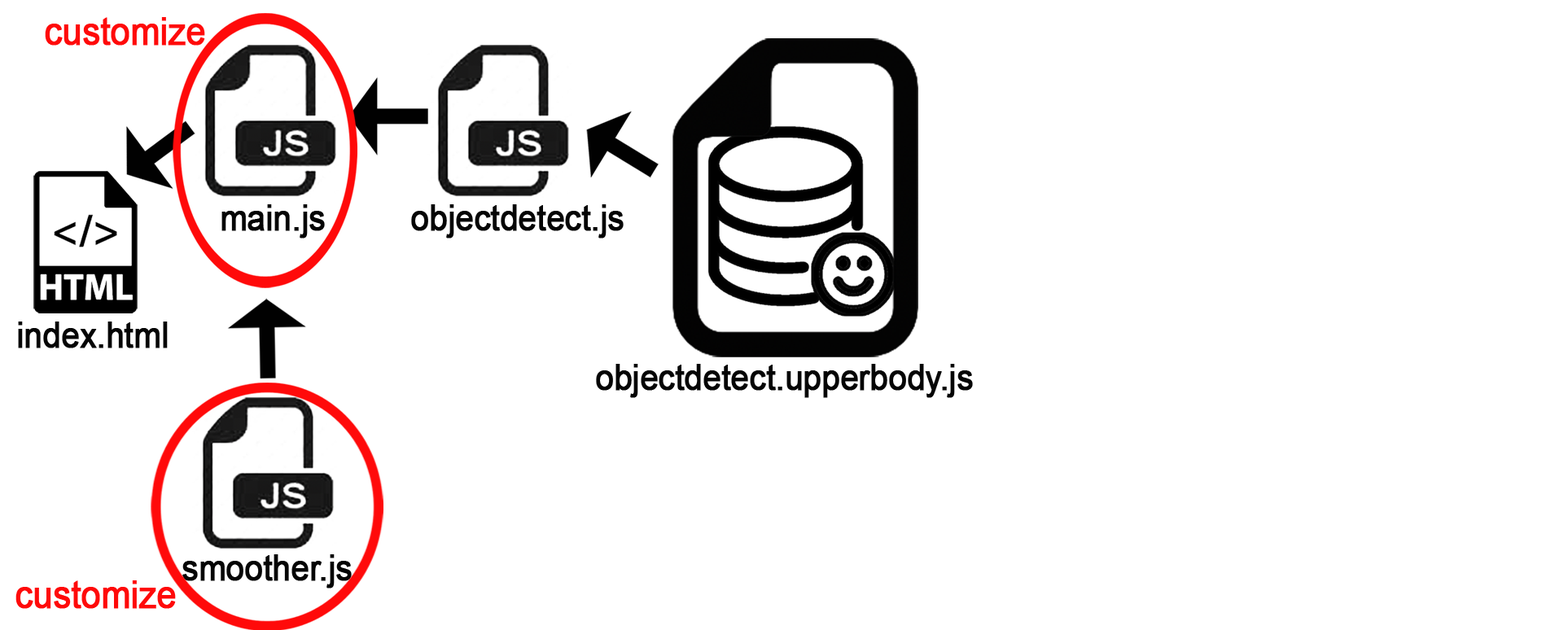
<style>
.page{position:relative;width:1568px;height:630px;background:#ffffff}
.page>*{position:absolute;margin:0}
.t1{font:38.2px "ArialMT";letter-spacing:-0.017em;color:#ff0a0a;font-weight:bold;scale:0.92 1}
.t2{font:35.5px "ArialMT";letter-spacing:-0.017em;color:#050505;font-weight:bold;scale:0.92 1}
</style>
<div class="page">
<p class="t1" style="left:45px;top:17px;width:160px;height:29px">customize</p>
<p class="t2" style="left:221px;top:204px;width:104px;height:35px">main.js</p>
<p class="t2" style="left:411px;top:204px;width:213px;height:35px">objectdetect.js</p>
<p class="t2" style="left:18px;top:322px;width:150px;height:26px">index.html</p>
<p class="t2" style="left:596px;top:364px;width:377px;height:34px">objectdetect.upperbody.js</p>
<p class="t2" style="left:182px;top:554px;width:170px;height:35px">smoother.js</p>
<p class="t1" style="left:15px;top:580px;width:161px;height:29px">customize</p>
</div>
